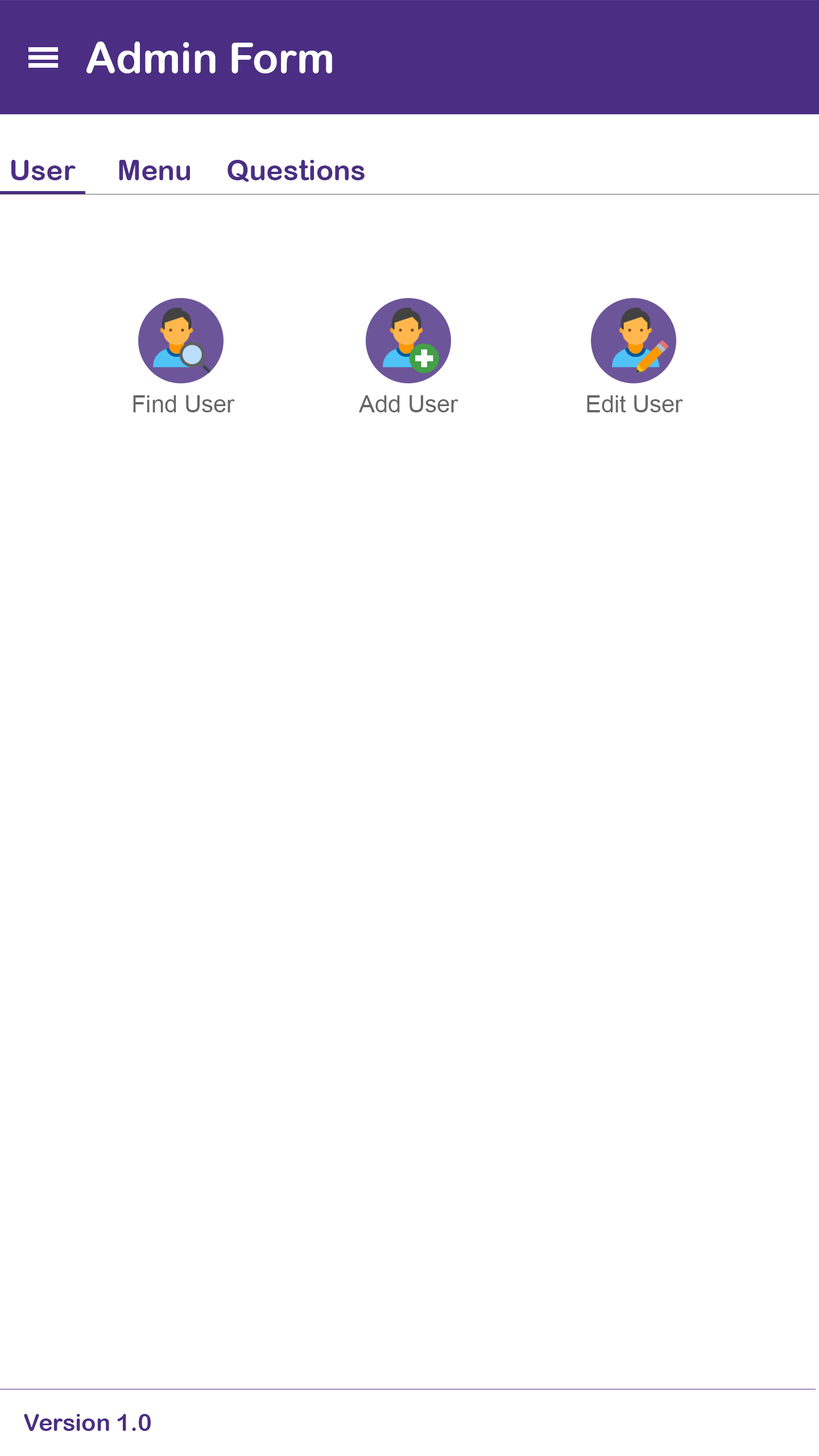
<style>
.page{position:relative;width:819px;height:1456px;background:#ffffff}
.page>*{position:absolute;margin:0}
.t1{font:42.7px "ArialRoundedMTBold";color:#ffffff}
.t2{font:28.4px "ArialRoundedMTBold";color:#4b2e83}
.t3{font:23.7px "ArialMT";color:#666666}
.t4{font:23.7px "ArialRoundedMTBold";color:#4b2e83}
</style>
<div class="page">
<p class="t1" style="left:86px;top:42px;width:246px;height:31px">Admin Form</p>
<p class="t2" style="left:11px;top:160px;width:65px;height:20px">User</p>
<p class="t2" style="left:119px;top:160px;width:71px;height:20px">Menu</p>
<p class="t2" style="left:227px;top:160px;width:138px;height:22px">Questions</p>
<p class="t3" style="left:133px;top:395px;width:102px;height:17px">Find User</p>
<p class="t3" style="left:358px;top:395px;width:100px;height:17px">Add User</p>
<p class="t3" style="left:587px;top:395px;width:96px;height:17px">Edit User</p>
<p class="t4" style="left:24px;top:1414px;width:127px;height:17px">Version 1.0</p>
</div>
